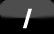
<style>
.page{position:relative;width:54px;height:34px;background:#4d4d4d}
.page>*{position:absolute;margin:0}
.t1{font:24px "Impact";color:#ffffff}
</style>
<div class="page">
<p class="t1" style="left:23px;top:8px;width:9px;height:21px">/</p>
</div>
